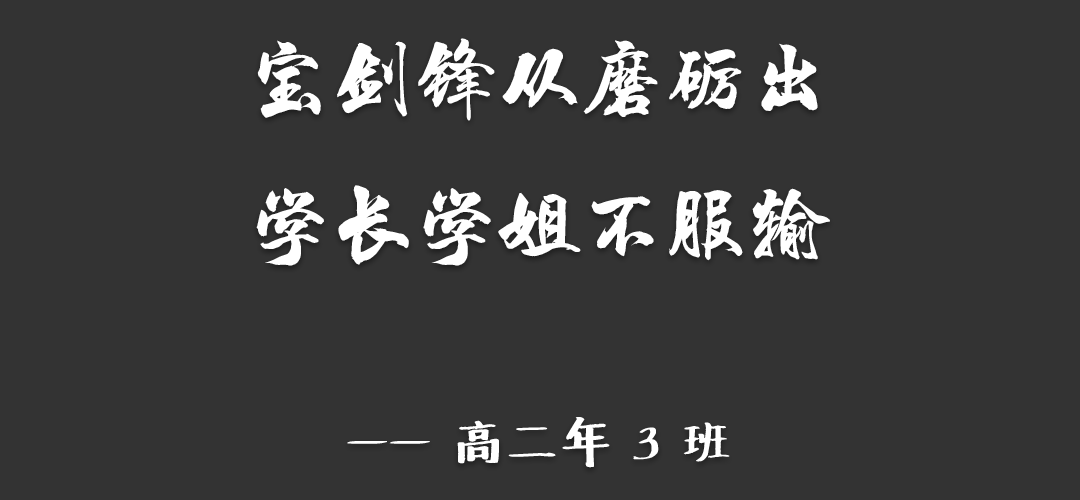
<style>
.page{position:relative;width:1080px;height:500px;background:#333333}
.page>*{position:absolute;margin:0}
.t1{font:83.3px "HYChengXingJ";color:#ffffff}
.t2{font:50px "Undefined";color:#ffffff}
</style>
<div class="page">
<p class="t1" style="left:256px;top:38px;width:574px;height:430px;text-align:center">宝剑锋从磨砺出<br>学长学姐不服输<br><span class="t2"><br>—— 高二年 3 班</span></p>
</div>
